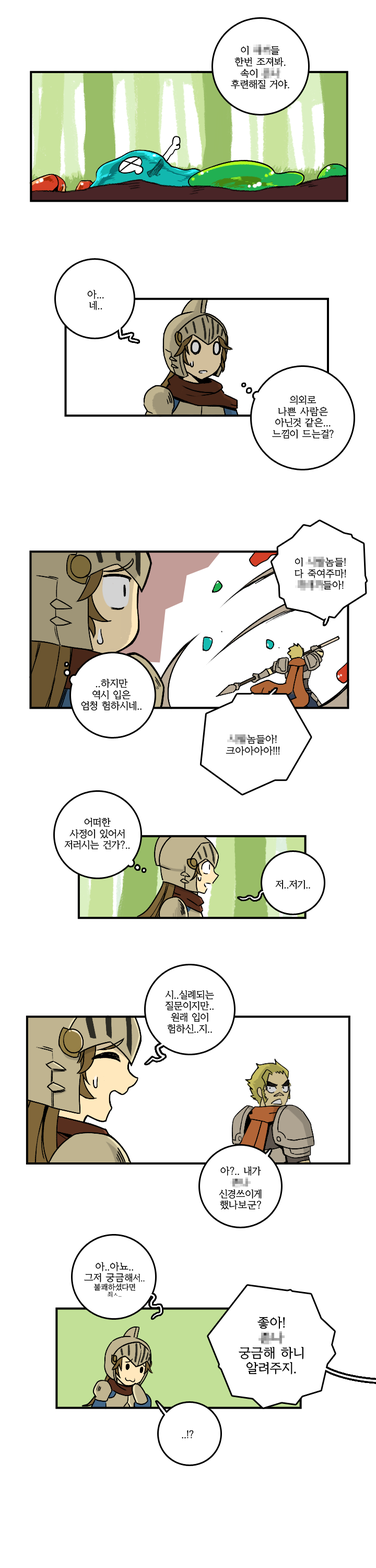
<style>
.page{position:relative;width:376px;height:1568px;background:#ffffff}
.page>*{position:absolute;margin:0}
.t1{font:9.4px "KoreanYMJ-B";color:#000000}
.t2{font:8.9px "KoreanYMJ-B";color:#000000}
.t3{font:8.4px "KoreanYMJ-B";color:#000000}
.t4{font:7.3px "KoreanYMJ-B";color:#000000}
.t5{font:5.7px "KoreanYMJ-B";color:#000000}
</style>
<div class="page">
<p class="t1" style="left:87px;top:290px;width:17px;height:20px;text-align:center">아...<br>네..</p>
<p class="t1" style="left:272px;top:395px;width:62px;height:44px;text-align:center">의외로<br>나쁜 사람은<br>아닌것 같은...<br>느낌이 드는걸?</p>
<p class="t1" style="left:81px;top:678px;width:61px;height:33px;text-align:center">..하지만<br>역시 입은<br>엄청 험하시네..</p>
<p class="t1" style="left:64px;top:817px;width:66px;height:33px;text-align:center">어떠한<br>사정이 있어서<br>저러시는 건가?..</p>
<p class="t1" style="left:275px;top:880px;width:35px;height:10px">저..저기..</p>
<p class="t1" style="left:165px;top:990px;width:49px;height:44px;text-align:center">시..실례되는<br>질문이지만..<br>원래 입이<br>험하신..지..</p>
<p class="t1" style="left:84px;top:1262px;width:61px;height:35px;text-align:center">아..아뇨..<br>그저 궁금<span class="t2">해</span><span class="t3">서..<br></span><span class="t4">불쾌하셨다면<br></span><span class="t5">죄ㅅ..</span></p>
<p class="t1" style="left:182px;top:1430px;width:12px;height:8px">..!?</p>
</div>
